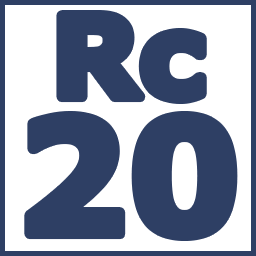
<style>
.page{position:relative;width:256px;height:256px;background:#2e3f64}
.page>*{position:absolute;margin:0}
.t1{font:112.6px "Verdana-Bold";color:#2e3f64}
.t2{font:158.6px "Verdana-Bold";color:#2e3f64}
</style>
<div class="page">
<p class="t1" style="left:61px;top:15px;width:141px;height:84px">Rc</p>
<p class="t2" style="left:29px;top:116px;width:204px;height:120px">20</p>
</div>
